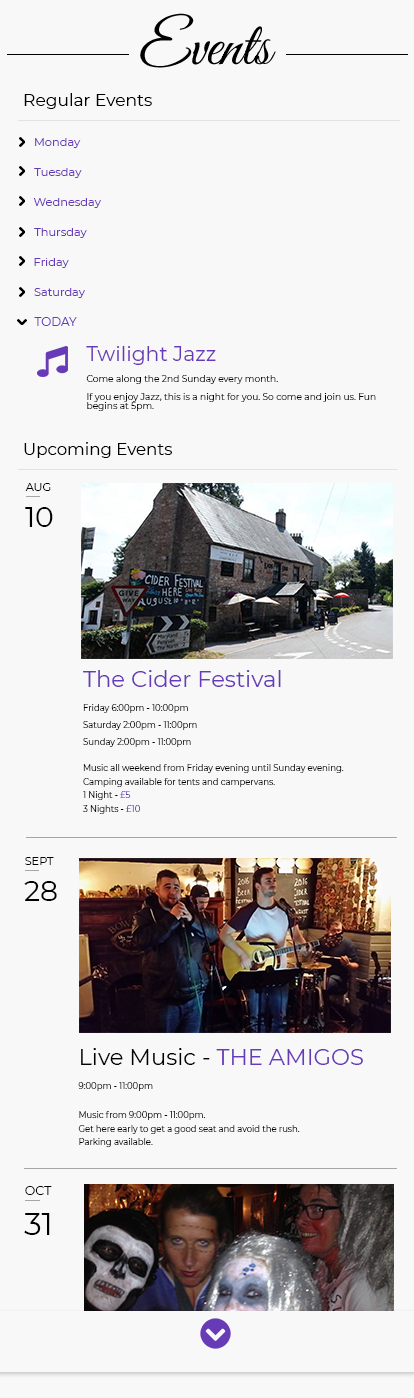
<style>
.page{position:relative;width:414px;height:1398px;background:#f8f8f8}
.page>*{position:absolute;margin:0}
.t1{font:62.5px "GreatVibes-Regular";color:#000000}
.t2{font:16.9px "Montserrat-Regular";color:#000001}
.t3{font:11.4px "Montserrat-Regular";color:#673ab7}
.t4{font:12px "Montserrat-Regular";color:#673ab7}
.t5{font:20.4px "Montserrat-Regular";color:#673ab7}
.t6{font:9.1px/9.1px "Montserrat-Regular";color:#000000}
.t7{font:11.3px "Montserrat-Regular";color:#000000}
.t8{font:28.3px "Montserrat-Regular";color:#000000}
.t9{font:22.7px "Montserrat-Regular";color:#673ab7}
.t10{font:8.5px/17px "Montserrat-Regular";color:#000000}
.t11{font:8.5px/13.6px "Montserrat-Regular";color:#000000}
.t12{font:8.5px/13.6px "Montserrat-Regular";color:#673ab7}
.t13{font:28.2px "Montserrat-Regular";color:#000000}
.t14{font:22.5px "Montserrat-Regular";color:#000000}
.t15{font:22.5px "Montserrat-Regular";color:#673ab7}
.t16{font:8.4px "Montserrat-Regular";color:#000000}
.t17{font:8.4px/13.5px "Montserrat-Regular";color:#000000}
.t18{font:12.6px "Montserrat-Regular";color:#000000}
.t19{font:31.4px "Montserrat-Regular";color:#000000}
</style>
<div class="page">
<p class="t1" style="left:140px;top:13px;width:136px;height:55px">Events</p>
<p class="t2" style="left:24px;top:93px;width:128px;height:16px">Regular Events</p>
<p class="t3" style="left:35px;top:138px;width:46px;height:10px">Monday</p>
<p class="t3" style="left:34px;top:168px;width:48px;height:10px">Tuesday</p>
<p class="t3" style="left:33px;top:198px;width:68px;height:10px">Wednesday</p>
<p class="t3" style="left:34px;top:228px;width:53px;height:10px">Thursday</p>
<p class="t3" style="left:34px;top:258px;width:35px;height:10px">Friday</p>
<p class="t3" style="left:34px;top:288px;width:51px;height:10px">Saturday</p>
<p class="t4" style="left:34px;top:317px;width:43px;height:9px">TODAY</p>
<p class="t5" style="left:86px;top:346px;width:130px;height:19px">Twilight Jazz</p>
<p class="t6" style="left:86px;top:375px;width:290px;height:36px">Come along the 2nd Sunday every month. <br><br>If you enjoy Jazz, this is a night for you. So come and join us. Fun begins at 5pm.</p>
<p class="t2" style="left:24px;top:442px;width:148px;height:16px">Upcoming Events</p>
<p class="t7" style="left:25px;top:483px;width:26px;height:8px">AUG</p>
<p class="t8" style="left:25px;top:507px;width:28px;height:20px">10</p>
<p class="t9" style="left:83px;top:670px;width:198px;height:17px">The Cider Festival</p>
<p class="t10" style="left:83px;top:704px;width:114px;height:43px">Friday 6:00pm - 10:00pm<br>Saturday 2:00pm - 11:00pm<br>Sunday 2:00pm - 11:00pm</p>
<p class="t11" style="left:83px;top:764px;width:261px;height:50px">Music all weekend from Friday evening until Sunday evening.<br>Camping available for tents and campervans.  <br>1 Night - <span class="t12">£5<br></span>3 Nights - <span class="t12">£10</span></p>
<p class="t7" style="left:25px;top:857px;width:29px;height:8px">SEPT</p>
<p class="t13" style="left:24px;top:881px;width:33px;height:20px">28</p>
<p class="t14" style="left:81px;top:1048px;width:282px;height:17px">Live Music - <span class="t15">THE AMIGOS</span></p>
<p class="t16" style="left:78px;top:1082px;width:75px;height:9px">9:00pm - 11:00pm</p>
<p class="t17" style="left:78px;top:1111px;width:222px;height:36px">Music from 9:00pm - 11:00pm.<br>Get here early to get a good seat and avoid the rush.<br>Parking available.</p>
<p class="t18" style="left:25px;top:1186px;width:27px;height:9px">OCT</p>
<p class="t19" style="left:24px;top:1213px;width:26px;height:22px">31</p>
</div>
